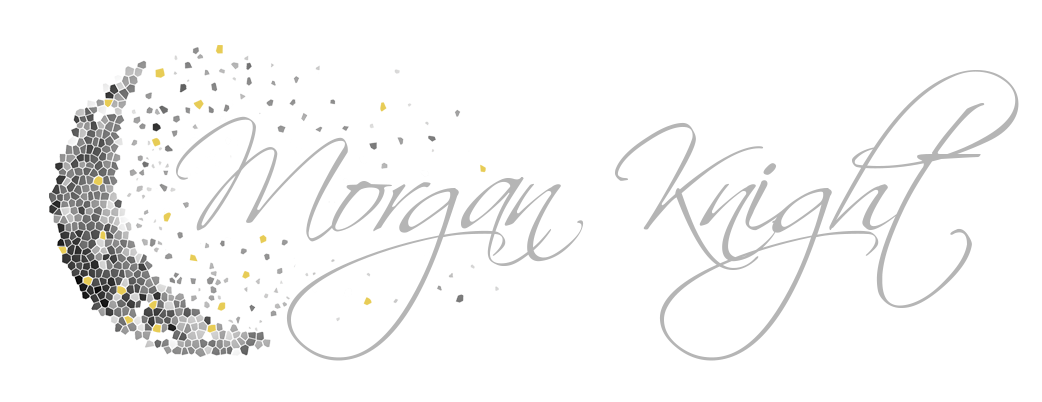
<style>
.page{position:relative;width:1042px;height:402px;background:#ffffff}
.page>*{position:absolute;margin:0}
.t1{font:141.8px "Scriptina";color:#b5b5b5}
</style>
<div class="page">
<p class="t1" style="left:175px;top:70px;width:844px;height:291px">Morgan Knight</p>
</div>
